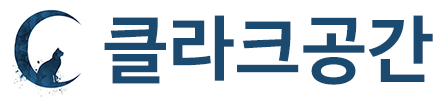
<style>
.page{position:relative;width:445px;height:100px;background:#ffffff}
.page>*{position:absolute;margin:0}
.t1{font:72px "SDGothicNeob-fBd";color:#1a4a70}
</style>
<div class="page">
<p class="t1" style="left:104px;top:15px;width:329px;height:70px">클라크공간</p>
</div>
